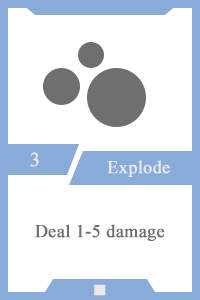
<style>
.page{position:relative;width:200px;height:300px;background:#ffffff}
.page>*{position:absolute;margin:0}
.t1{font:20px "TimesNewRomanPSMT";color:#e9e9e9;font-weight:bold}
.t2{font:18px "TimesNewRomanPSMT";color:#e9e9e9;font-weight:bold}
.t3{font:18px "TimesNewRomanPSMT";color:#6f6f6f;font-weight:bold}
.t4{font:14px "AdobeHeitiStd-Regular";color:#e9e9e9;font-weight:bold}
</style>
<div class="page">
<p class="t1" style="left:30px;top:152px;width:9px;height:15px">3</p>
<p class="t2" style="left:107px;top:160px;width:63px;height:17px">Explode</p>
<p class="t3" style="left:35px;top:224px;width:130px;height:17px">Deal 1-5 damage</p>
<p class="t4" style="left:94px;top:284px;width:12px;height:12px">■</p>
</div>
